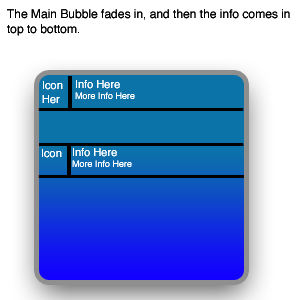
<style>
.page{position:relative;width:300px;height:300px;background:#ffffff}
.page>*{position:absolute;margin:0}
.t1{font:12px "Helvetica";color:#000000}
.t2{font:11px "Helvetica";color:#ffffff}
.t3{font:9px "Helvetica";color:#ffffff}
</style>
<div class="page">
<p class="t1" style="left:7px;top:9px;width:283px;height:27px">The Main Bubble fades in, and then the info comes in top to bottom.</p>
<p class="t2" style="left:42px;top:81px;width:21px;height:23px">Icon Here</p>
<p class="t3" style="left:75px;top:80px;width:60px;height:19px"><span class="t2">Info Here<br></span>More Info Here</p>
<p class="t2" style="left:42px;top:149px;width:20px;height:9px">Icon Here</p>
<p class="t3" style="left:72px;top:148px;width:60px;height:19px"><span class="t2">Info Here<br></span>More Info Here</p>
</div>
